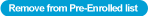
<style>
.page{position:relative;width:150px;height:16px;background:#019fd5}
.page>*{position:absolute;margin:0}
.t1{font:10px "Arial-BoldMT";letter-spacing:-0.05em;color:#ffffff}
</style>
<div class="page">
<p class="t1" style="left:9px;top:4px;width:129px;height:8px">Remove from Pre-Enrolled list</p>
</div>
